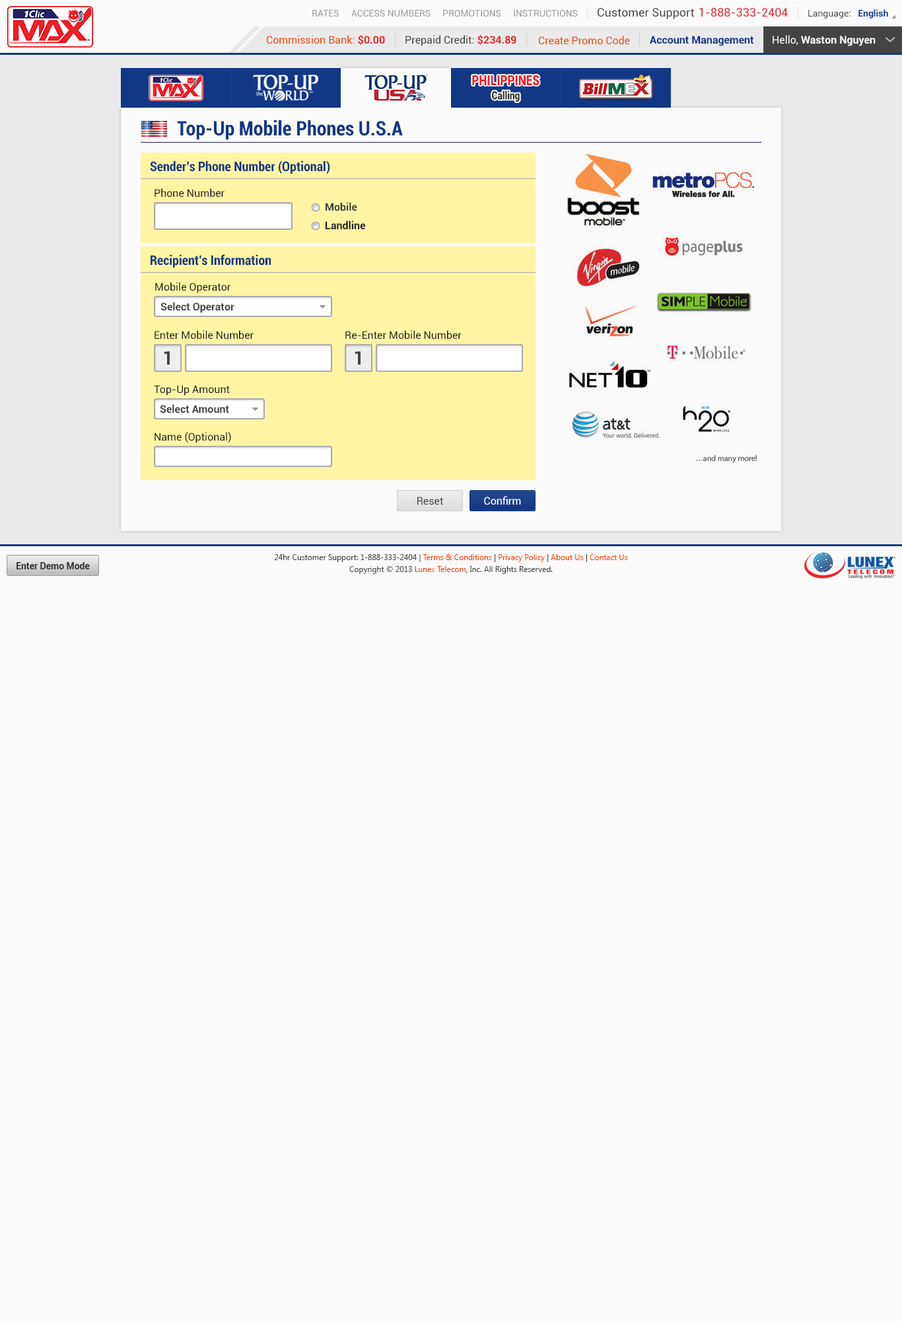
<style>
.page{position:relative;width:902px;height:1321px;background:#fafafa}
.page>*{position:absolute;margin:0}
.t1{font:9.2px "Roboto-Regular";color:#999999}
.t2{font:11.6px "Roboto-Regular";color:#444444}
.t3{font:11.6px "Roboto-Regular";color:#ec2029}
.t4{font:9.2px "Roboto-Regular";color:#444444}
.t5{font:9.2px "Roboto-Bold";color:#123785}
.t6{font:10.6px "Roboto-Regular";color:#ee4400}
.t7{font:10.6px "Roboto-Bold";color:#ec2028}
.t8{font:10.6px "Roboto-Regular";color:#444444}
.t9{font:10.6px "Roboto-Bold";color:#123785}
.t10{font:10.6px "Roboto-Bold";color:#fafafa}
.t11{font:10.6px "Roboto-Regular";color:#fafafa}
.t12{font:14.1px "Roboto-Black";color:#ec2028;scale:0.81 1}
.t13{font:11.3px "Roboto-Black";color:#333333;scale:0.81 1}
.t14{font:19.8px "Roboto-BoldCondensed";color:#123785}
.t15{font:13.2px "Roboto-BoldCondensed";color:#123785}
.t16{font:10.6px "Roboto-Regular";color:#222222}
.t17{font:10.6px "Roboto-Bold";color:#444444}
.t18{font:10.6px "Roboto-Bold";color:#222222}
.t19{font:18.5px "Roboto-Bold";color:#444444}
.t20{font:10.6px "Roboto-Regular";color:#ffffff}
.t21{font:7.9px/11.9px "SegoeUI";color:#444444}
.t22{font:7.9px/11.9px "SegoeUI";color:#ee4400}
.t23{font:7.9px/11.9px "SegoeUI";color:#333333}
.t24{font:9.2px "Roboto-Bold";color:#333333}
</style>
<div class="page">
<p class="t1" style="left:312px;top:10px;width:27px;height:7px">RATES</p>
<p class="t1" style="left:351px;top:10px;width:80px;height:7px">ACCESS NUMBERS</p>
<p class="t1" style="left:443px;top:10px;width:58px;height:7px">PROMOTIONS</p>
<p class="t1" style="left:514px;top:10px;width:64px;height:7px">INSTRUCTIONS</p>
<p class="t2" style="left:598px;top:8px;width:96px;height:11px">Customer Support</p>
<p class="t3" style="left:700px;top:8px;width:88px;height:9px">1-888-333-2404</p>
<p class="t4" style="left:809px;top:9px;width:80px;height:9px">Language:   <span class="t5">English</span></p>
<p class="t6" style="left:267px;top:35px;width:118px;height:10px">Commission Bank: <span class="t7">$0.00</span></p>
<p class="t8" style="left:406px;top:35px;width:111px;height:11px">Prepaid Credit: <span class="t7">$234.89</span></p>
<p class="t6" style="left:539px;top:36px;width:91px;height:9px">Create Promo Code</p>
<p class="t9" style="left:650px;top:36px;width:104px;height:10px">Account Management</p>
<p class="t10" style="left:773px;top:35px;width:103px;height:11px"><span class="t11">Hello, </span>Waston Nguyen</p>
<p class="t12" style="left:472px;top:75px;width:68px;height:11px">PHILIPPINES</p>
<p class="t13" style="left:492px;top:91px;width:28px;height:11px">Calling</p>
<p class="t14" style="left:177px;top:120px;width:226px;height:20px">Top-Up Mobile Phones U.S.A</p>
<p class="t15" style="left:150px;top:161px;width:180px;height:13px">Sender’s Phone Number (Optional)</p>
<p class="t16" style="left:155px;top:188px;width:70px;height:10px">Phone Number</p>
<p class="t17" style="left:326px;top:202px;width:31px;height:9px">Mobile</p>
<p class="t18" style="left:326px;top:221px;width:40px;height:9px">Landline</p>
<p class="t15" style="left:151px;top:254px;width:121px;height:14px">Recipient’s Information</p>
<p class="t16" style="left:155px;top:282px;width:76px;height:11px">Mobile Operator</p>
<p class="t17" style="left:161px;top:302px;width:74px;height:11px">Select Operator</p>
<p class="t16" style="left:155px;top:330px;width:99px;height:10px">Enter Mobile Number</p>
<p class="t16" style="left:346px;top:330px;width:116px;height:10px">Re-Enter Mobile Number</p>
<p class="t19" style="left:164px;top:351px;width:6px;height:14px">1</p>
<p class="t19" style="left:355px;top:351px;width:6px;height:14px">1</p>
<p class="t16" style="left:154px;top:385px;width:76px;height:11px">Top-Up Amount</p>
<p class="t17" style="left:160px;top:404px;width:69px;height:10px">Select Amount</p>
<p class="t16" style="left:155px;top:431px;width:76px;height:12px">Name (Optional)</p>
<p class="t8" style="left:418px;top:497px;width:25px;height:8px">Reset</p>
<p class="t20" style="left:484px;top:496px;width:37px;height:9px">Confirm</p>
<p class="t21" style="left:274px;top:554px;width:354px;height:20px;text-align:center">24hr Customer Support: 1-888-333-2404 | <span class="t22">Terms &amp; Conditions</span><span class="t23"> | </span><span class="t22">Privacy Policy</span><span class="t23"> | </span><span class="t22">About Us</span><span class="t23"> | </span><span class="t22">Contact Us<br></span>Copyright © 2013 <span class="t22">Lunex Telecom</span><span class="t23">,</span> Inc. All Rights Reserved.</p>
<p class="t24" style="left:17px;top:562px;width:73px;height:7px">Enter Demo Mode</p>
</div>
